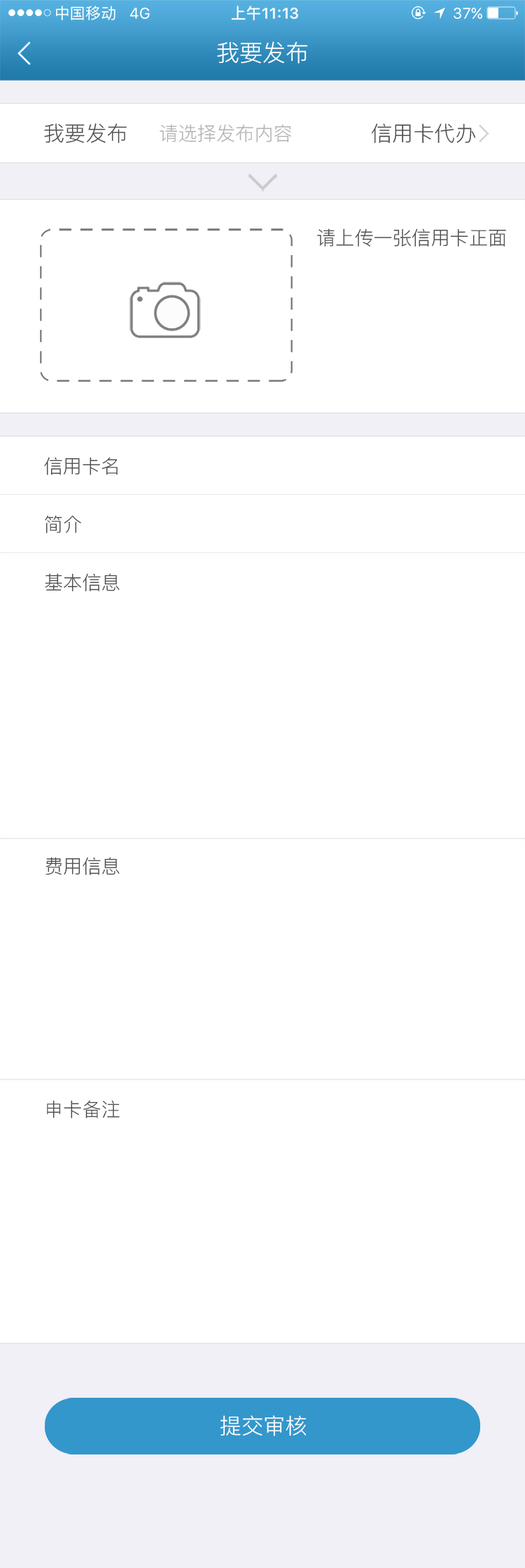
<style>
.page{position:relative;width:525px;height:1568px;background:#ffffff}
.page>*{position:absolute;margin:0}
.t1{font:23.3px "PingFang-SC-Regular";color:#ffffff}
.t2{font:21px "PingFang-SC-Regular";color:#4d4d4d}
.t3{font:19px "PingFang-SC-Regular";color:#b2b2b2}
.t4{font:19px "PingFang-SC-Regular";color:#4d4d4d}
.t5{font:21.7px "PingFang-SC-Regular";color:#ffffff}
</style>
<div class="page">
<p class="t1" style="left:217px;top:41px;width:91px;height:23px">我要发布</p>
<p class="t2" style="left:44px;top:123px;width:83px;height:21px">我要发布</p>
<p class="t3" style="left:160px;top:124px;width:132px;height:18px">请选择发布内容</p>
<p class="t2" style="left:372px;top:123px;width:104px;height:21px">信用卡代办</p>
<p class="t4" style="left:317px;top:228px;width:190px;height:19px">请上传一张信用卡正面</p>
<p class="t4" style="left:44px;top:457px;width:74px;height:18px">信用卡名</p>
<p class="t4" style="left:45px;top:515px;width:36px;height:18px">简介</p>
<p class="t4" style="left:45px;top:573px;width:75px;height:18px">基本信息</p>
<p class="t4" style="left:46px;top:857px;width:74px;height:18px">费用信息</p>
<p class="t4" style="left:47px;top:1100px;width:73px;height:18px">申卡备注</p>
<p class="t5" style="left:221px;top:1415px;width:86px;height:21px">提交审核</p>
</div>
